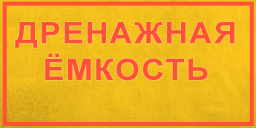
<style>
.page{position:relative;width:256px;height:128px}
.page>*{position:absolute;margin:0}
.t1{font:29.6px/36.6px "Arial-BoldMT";letter-spacing:0.05em;color:#ff5139;scale:1.08 1}
</style>
<div class="page">
<p class="t1" style="left:15px;top:22px;width:220px;height:59px;text-align:center">ДРЕНАЖНАЯ<br>ЁМКОСТЬ</p>
</div>
